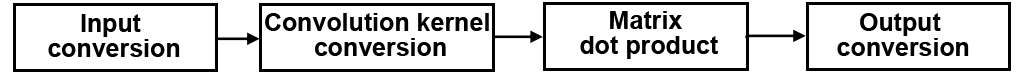
<style>
.page{position:relative;width:1031px;height:74px;background:#ffffff}
.page>*{position:absolute;margin:0}
.t1{font:12px/25px "Arial-BoldMT";color:#000000}
</style>
<div class="page">
<p class="t1" style="left:48px;top:14px;width:132px;height:43px;text-align:center">Input <br>conversion</p>
<p class="t1" style="left:265px;top:13px;width:224px;height:43px;text-align:center">Convolution kernel <br>conversion</p>
<p class="t1" style="left:580px;top:11px;width:138px;height:48px;text-align:center">Matrix <br>dot product</p>
<p class="t1" style="left:837px;top:13px;width:132px;height:43px;text-align:center">Output <br>conversion</p>
</div>
